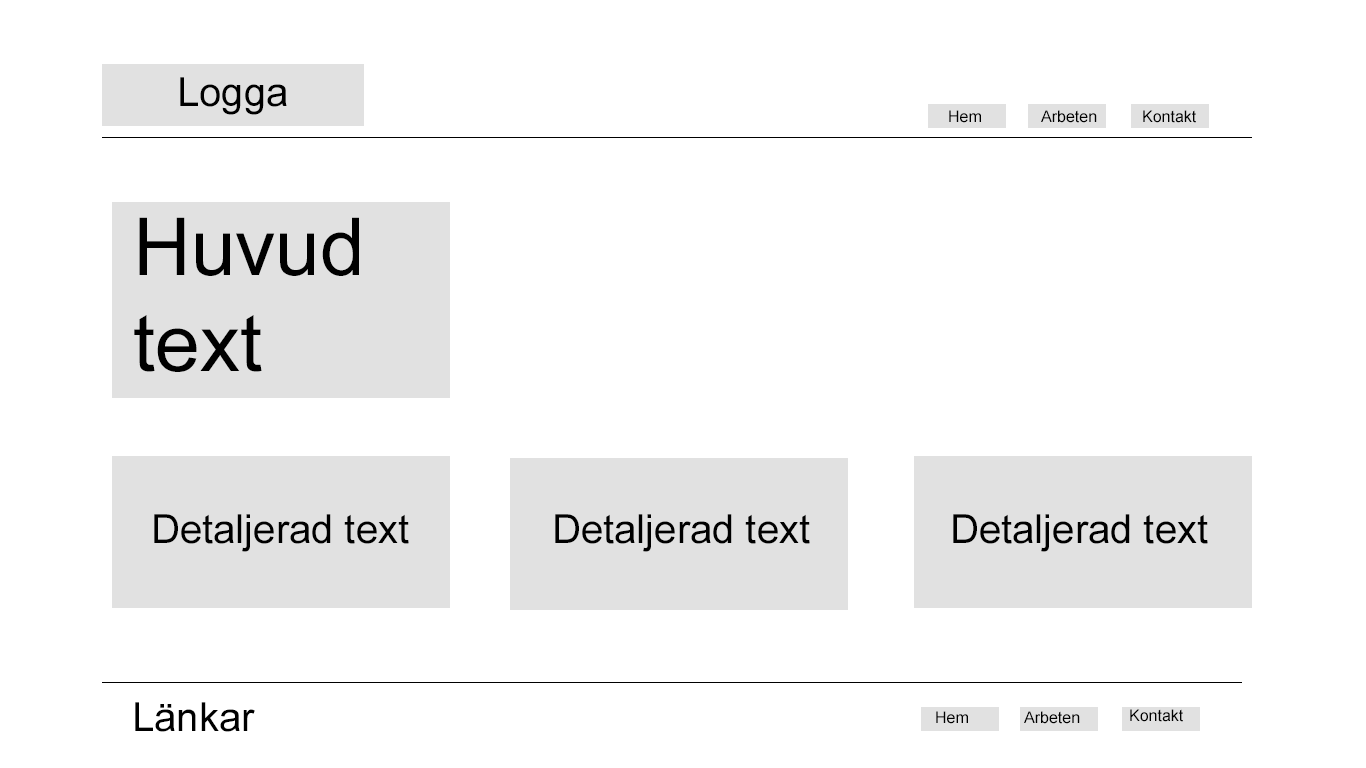
<style>
.page{position:relative;width:1366px;height:768px;background:#ffffff}
.page>*{position:absolute;margin:0}
.t1{font:40px "ArialMT";color:#000000}
.t2{font:16px "ArialMT";color:#000000}
.t3{font:80px "ArialMT";color:#000000}
</style>
<div class="page">
<p class="t1" style="left:180px;top:77px;width:107px;height:38px">Logga</p>
<p class="t2" style="left:949px;top:110px;width:32px;height:13px">Hem</p>
<p class="t2" style="left:1041px;top:110px;width:56px;height:13px">Arbeten</p>
<p class="t2" style="left:1143px;top:110px;width:53px;height:13px">Kontakt</p>
<p class="t3" style="left:134px;top:217px;width:225px;height:155px">Huvud text</p>
<p class="t1" style="left:154px;top:514px;width:255px;height:38px">Detaljerad text</p>
<p class="t1" style="left:555px;top:514px;width:255px;height:38px">Detaljerad text</p>
<p class="t1" style="left:953px;top:514px;width:255px;height:38px">Detaljerad text</p>
<p class="t1" style="left:135px;top:702px;width:120px;height:30px">Länkar</p>
<p class="t2" style="left:936px;top:711px;width:32px;height:13px">Hem</p>
<p class="t2" style="left:1024px;top:711px;width:56px;height:13px">Arbeten</p>
<p class="t2" style="left:1130px;top:709px;width:53px;height:13px">Kontakt</p>
</div>
